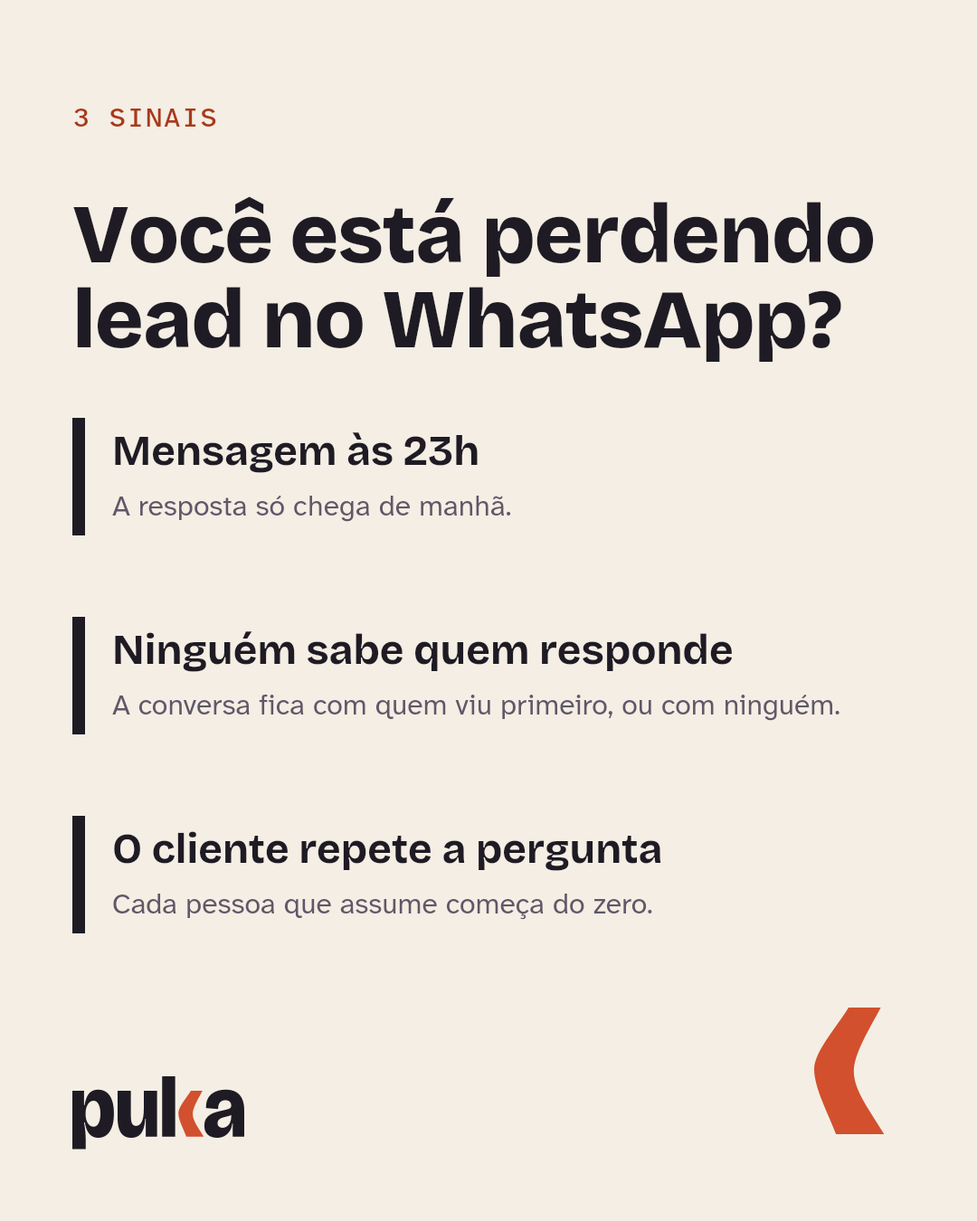
<style>
.page{position:relative;width:977px;height:1221px;background:#f4eee4}
.page>*{position:absolute;margin:0}
.t1{font:27.1px "AtkinsonHyperlegibleMono-Medium";letter-spacing:0.04em;color:#a83a1c}
.t2{font:83.2px/85px "BricolageGrotesque-ExtraBold";letter-spacing:-0.012em;color:#1e1b24}
.t3{font:41.6px "BricolageGrotesque-Bold";color:#1e1b24}
.t4{font:28.9px "AtkinsonHyperlegibleNext-Regular";color:#5e5868}
</style>
<div class="page">
<p class="t1" style="left:74px;top:109px;width:142px;height:18px">3 SINAIS</p>
<p class="t2" style="left:73px;top:196px;width:801px;height:166px">Você está perdendo<br>lead no WhatsApp?</p>
<p class="t3" style="left:115px;top:432px;width:362px;height:41px">Mensagem às 23h</p>
<p class="t4" style="left:112px;top:496px;width:399px;height:26px">A resposta só chega de manhã.</p>
<p class="t3" style="left:115px;top:631px;width:618px;height:41px">Ninguém sabe quem responde</p>
<p class="t4" style="left:112px;top:695px;width:727px;height:26px">A conversa fica com quem viu primeiro, ou com ninguém.</p>
<p class="t3" style="left:114px;top:831px;width:547px;height:40px">O cliente repete a pergunta</p>
<p class="t4" style="left:113px;top:894px;width:539px;height:26px">Cada pessoa que assume começa do zero.</p>
</div>
